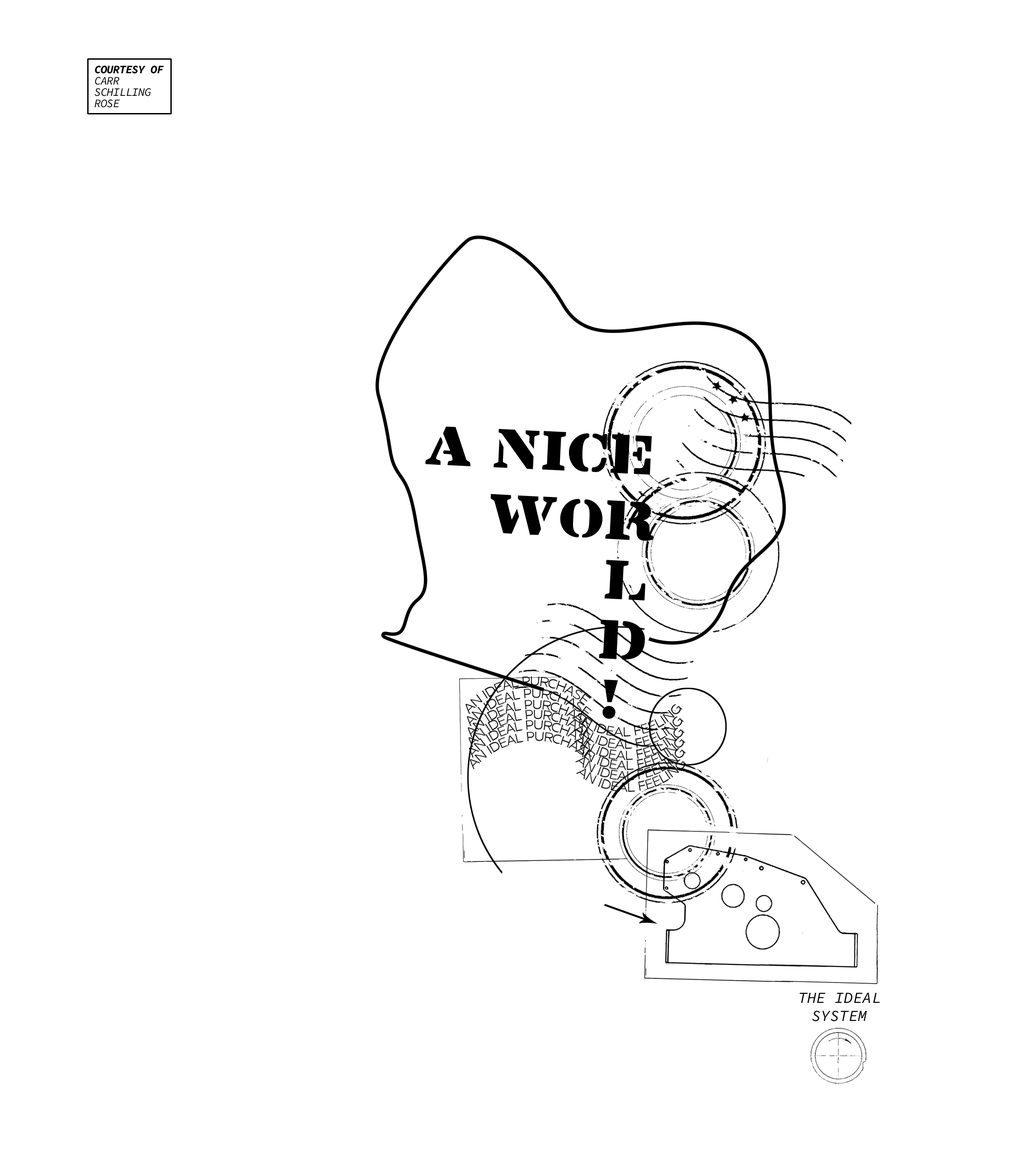
<style>
.page{position:relative;width:1034px;height:1153px;background:#ffffff}
.page>*{position:absolute;margin:0}
.t1{font:11.4px/11.4px "SourceCodeVariable-Italic";letter-spacing:-0.05em;color:#000000}
.t2{font:11.4px/11.4px "SourceCodeItalic-BoldItalic";letter-spacing:-0.05em;color:#000000}
.t3{font:49.9px "LintsecMedium";color:#000000}
.t4{font:13.3px "SukhumvitSet-Thin";letter-spacing:-0.05em;color:#000000}
.t5{font:15.3px "SourceCodeVariable-Italic";color:#000000}
</style>
<div class="page">
<p class="t1" style="left:94px;top:66px;width:70px;height:42px"><span class="t2">COURTESY OF<br></span>CARR<br>SCHILLING<br>ROSE</p>
<p class="t3" style="left:425px;top:426px;width:227px;height:49px;rotate:3deg">A NICE</p>
<p class="t3" style="left:491px;top:494px;width:163px;height:225px;text-align:center;rotate:3deg">WOR<br>      L<br>      D<br>     !</p>
<p class="t4" style="left:466px;top:676px;width:125px;height:38px;rotate:-5deg">AN IDEAL PURCHASE</p>
<p class="t4" style="left:572px;top:704px;width:111px;height:32px;rotate:-5deg">AN IDEAL FEELING</p>
<p class="t5" style="left:800px;top:992px;width:80px;height:29px;text-align:center">THE IDEAL<br>SYSTEM</p>
</div>
